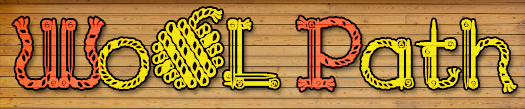
<style>
.page{position:relative;width:525px;height:109px}
.page>*{position:absolute;margin:0}
.t1{font:100px "KingthingsNeedles";color:#e4e21e}
.t2{font:100px "KingthingsNeedles";color:#f15f5f}
.t3{font:100px "KingthingsNeedles";color:#eae212}
</style>
<div class="page">
<p class="t1" style="left:13px;top:8px;width:504px;height:85px"><span class="t2">W</span><span class="t3">o</span>OL <span class="t2">P</span>ath</p>
</div>
